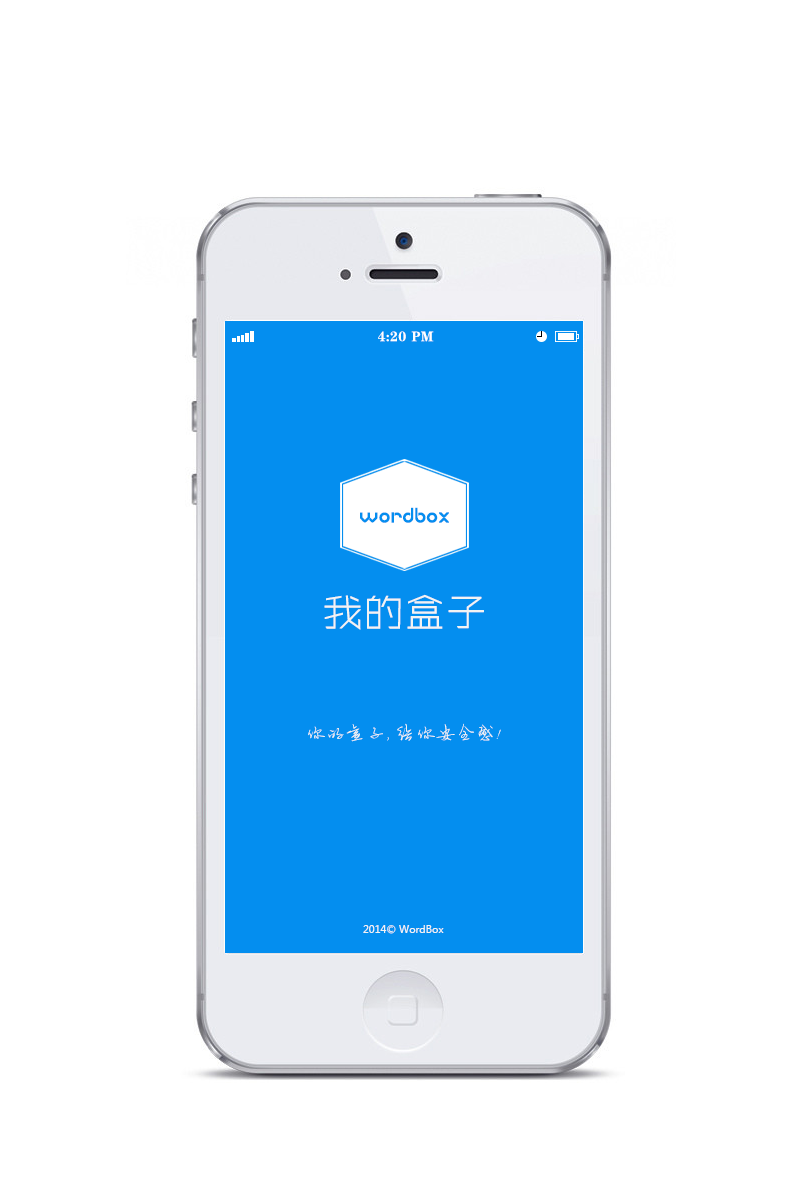
<style>
.page{position:relative;width:800px;height:1200px;background:#ffffff}
.page>*{position:absolute;margin:0}
.t1{font:14px "FZCSK--GBK1-0";letter-spacing:0.02em;color:#ffffff}
.t2{font:22.2px "BabyFace";color:#048eef}
.t3{font:40px "ZHSRXT--GBK1-0";color:#f3f3f3;font-weight:bold}
.t4{font:20px "--";color:#f3f3f3}
.t5{font:10px "MicrosoftYaHei";color:#f3f3f3}
</style>
<div class="page">
<p class="t1" style="left:378px;top:331px;width:28px;height:11px">4:20</p>
<p class="t1" style="left:411px;top:331px;width:23px;height:11px">PM</p>
<p class="t2" style="left:360px;top:507px;width:89px;height:16px">wordbox</p>
<p class="t3" style="left:324px;top:594px;width:160px;height:36px">我的盒子</p>
<p class="t4" style="left:308px;top:723px;width:193px;height:19px">你的盒子，给你安全感！</p>
<p class="t5" style="left:363px;top:925px;width:81px;height:9px">2014© WordBox</p>
</div>
